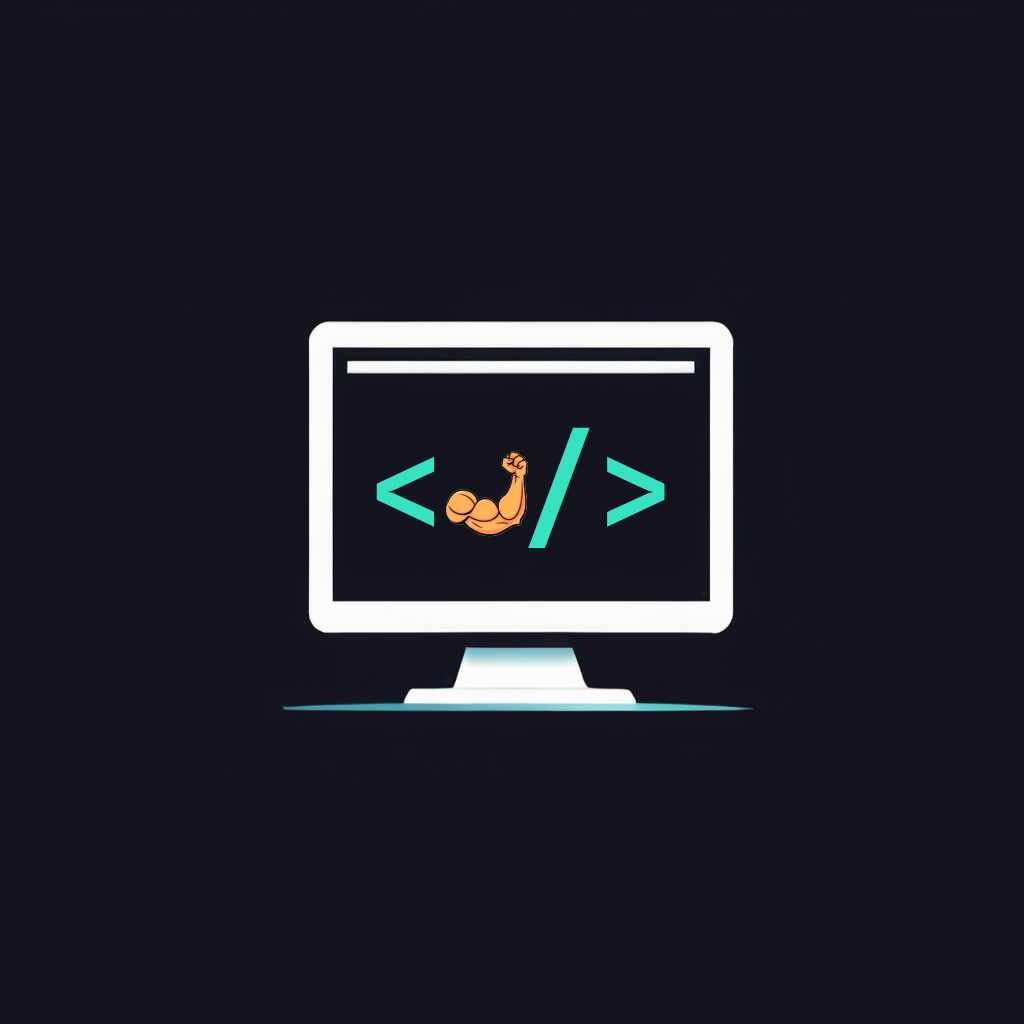
<style>
.page{position:relative;width:1024px;height:1024px;background:#14141f}
.page>*{position:absolute;margin:0}
.t1{font:128px "JetBrainsMono-Bold";color:#36e2c2}
</style>
<div class="page">
<p class="t1" style="left:376px;top:427px;width:289px;height:122px">&lt; /&gt;</p>
</div>
